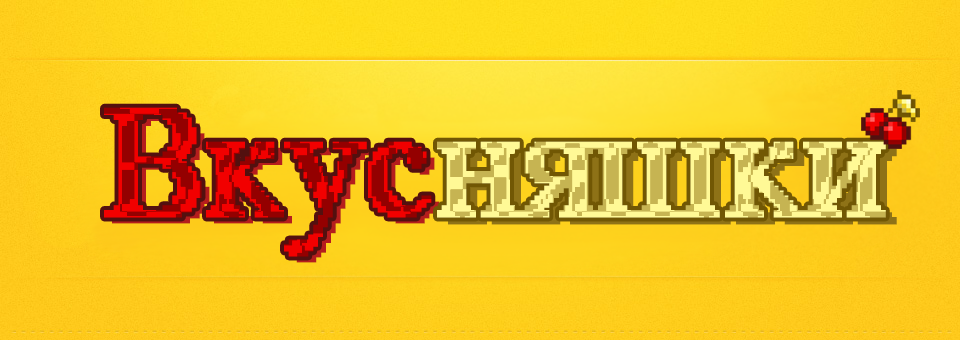
<style>
.page{position:relative;width:960px;height:340px}
.page>*{position:absolute;margin:0}
.t1{font:156px "MS Serif";font-weight:bold}
</style>
<div class="page">
<p class="t1" style="left:104px;top:107px;width:328px;height:150px">Вкус</p>
<p class="t1" style="left:112px;top:113px;width:328px;height:150px">Вкус</p>
<p class="t1" style="left:437px;top:141px;width:449px;height:77px">няшки</p>
</div>
